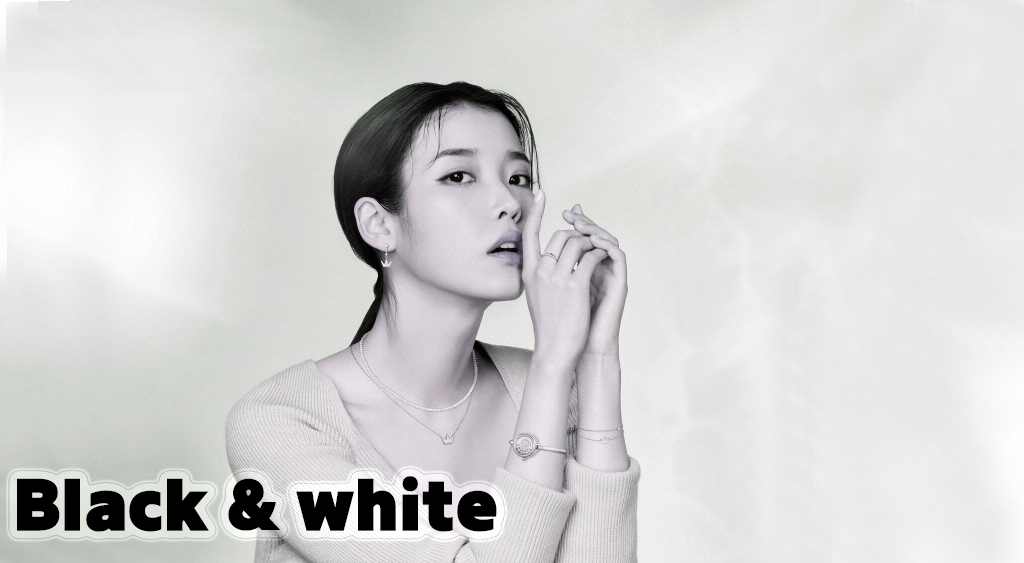
<style>
.page{position:relative;width:1024px;height:563px}
.page>*{position:absolute;margin:0}
.t1{font:57.8px "TTSupersizeBk";color:#000000}
</style>
<div class="page">
<p class="t1" style="left:17px;top:476px;width:480px;height:56px">Black &amp; white</p>
</div>
